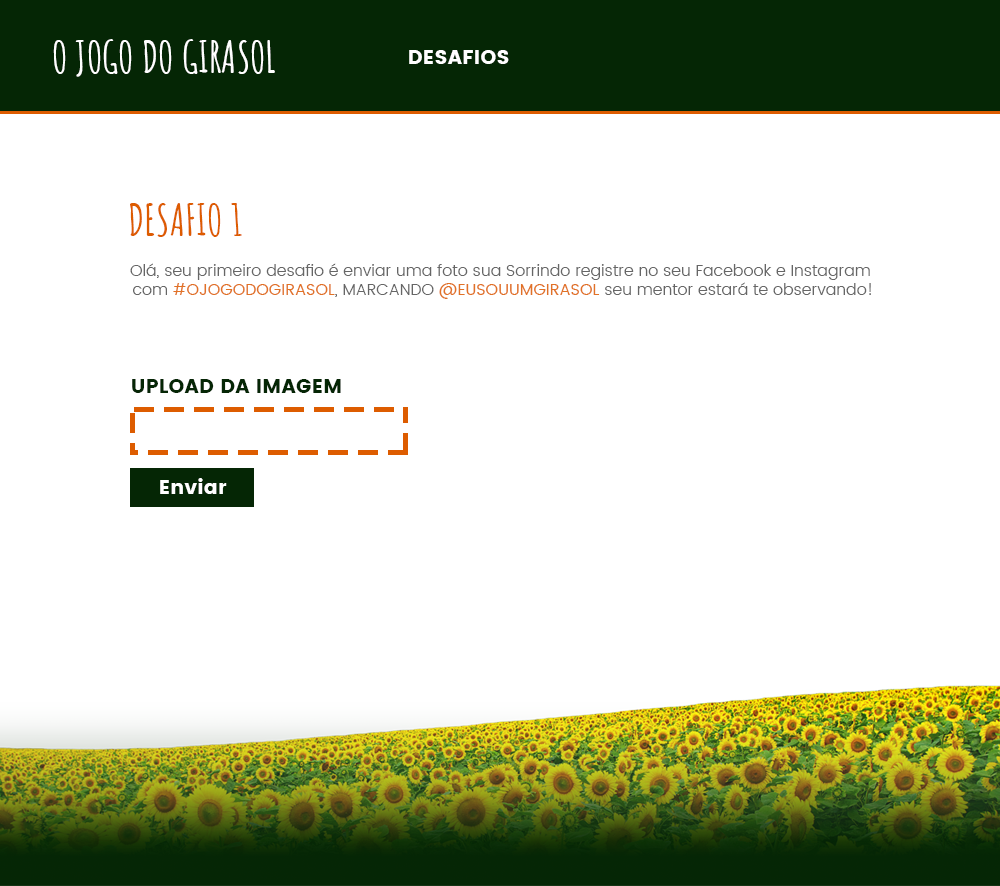
<style>
.page{position:relative;width:1000px;height:886px;background:#ffffff}
.page>*{position:absolute;margin:0}
.t1{font:43.4px "AmaticSC-Bold";color:#ffffff}
.t2{font:20.4px "Poppins";color:#ffffff}
.t3{font:43.4px "AmaticSC-Bold";color:#dd5c00}
.t4{font:16px "Poppins-Light";color:#666666}
.t5{font:16px "Poppins-Regular";color:#e17226}
.t6{font:20.4px "Poppins";color:#052605}
</style>
<div class="page">
<p class="t1" style="left:53px;top:39px;width:222px;height:38px">O JOGO DO GIRASOL</p>
<p class="t2" style="left:409px;top:50px;width:100px;height:14px">DESAFIOS</p>
<p class="t3" style="left:130px;top:203px;width:112px;height:34px">DESAFIO 1</p>
<p class="t4" style="left:130px;top:263px;width:741px;height:36px;text-align:center">Olá, seu primeiro desafio é enviar uma foto sua Sorrindo registre no seu Facebook e Instagram <br>com <span class="t5">#OJOGODOGIRASOL</span>, MARCANDO <span class="t5">@EUSOUUMGIRASOL</span> seu mentor estará te observando!</p>
<p class="t6" style="left:132px;top:379px;width:209px;height:14px">UPLOAD DA IMAGEM</p>
<p class="t2" style="left:160px;top:478px;width:67px;height:16px">Enviar</p>
</div>
